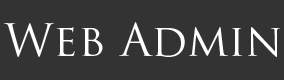
<style>
.page{position:relative;width:284px;height:80px;background:#333333}
.page>*{position:absolute;margin:0}
.t1{font:44.6px "TrajanPro-Regular";color:#ffffff}
</style>
<div class="page">
<p class="t1" style="left:3px;top:22px;width:277px;height:35px">Web Admin</p>
</div>
